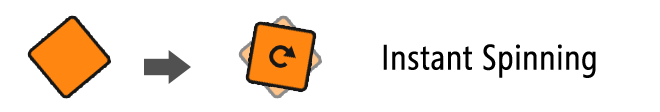
<style>
.page{position:relative;width:660px;height:112px;background:#ffffff}
.page>*{position:absolute;margin:0}
.t1{font:35px "SegoeCondensed";color:#000000;font-weight:bold}
</style>
<div class="page">
<p class="t1" style="left:383px;top:44px;width:213px;height:34px">Instant Spinning</p>
</div>
